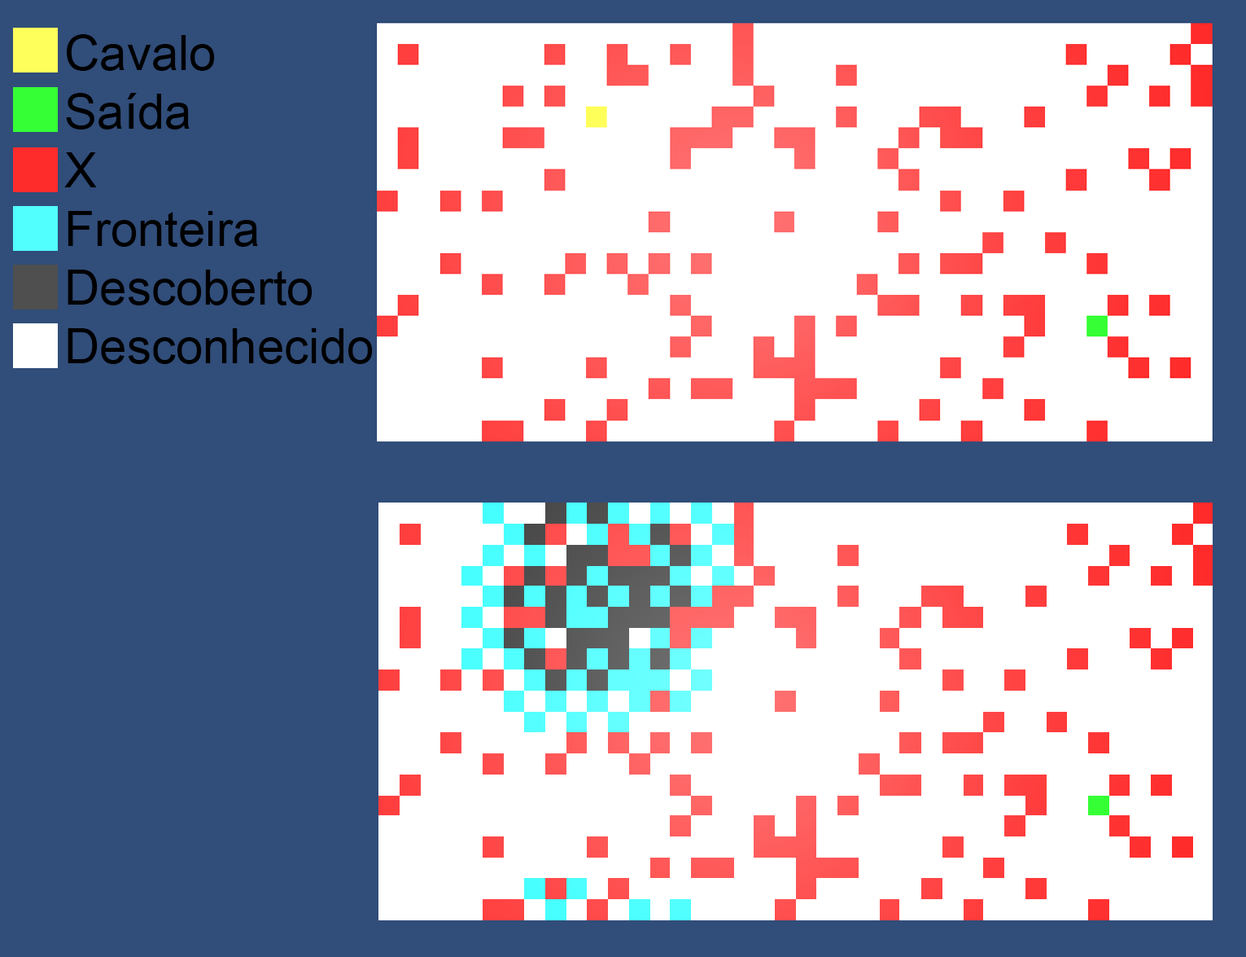
<style>
.page{position:relative;width:1246px;height:957px;background:#ffffff}
.page>*{position:absolute;margin:0}
.t1{font:48.8px "ArialMT";color:#000000}
</style>
<div class="page">
<p class="t1" style="left:64px;top:34px;width:309px;height:330px">Cavalo<br>Saída<br>X<br>Fronteira<br>Descoberto<br>Desconhecido</p>
</div>
